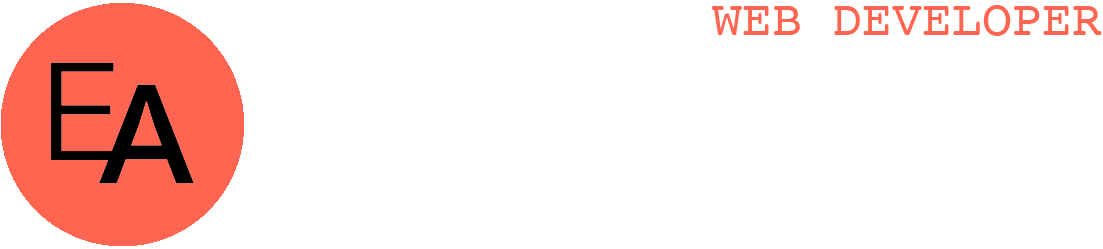
<style>
.page{position:relative;width:1103px;height:249px;background:#ffffff}
.page>*{position:absolute;margin:0}
.t1{font:50px "Courier";color:#ff6550}
</style>
<div class="page">
<p class="t1" style="left:712px;top:5px;width:390px;height:31px">WEB DEVELOPER</p>
</div>
